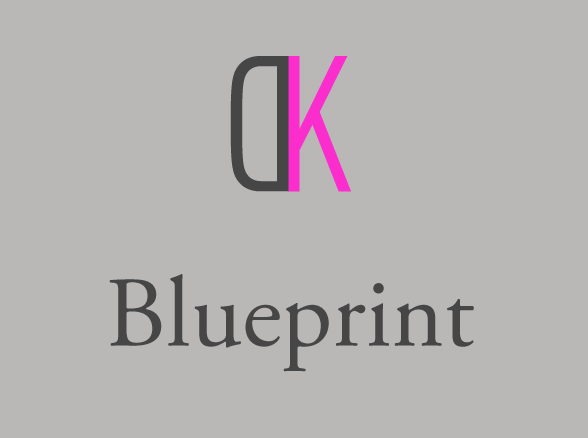
<style>
.page{position:relative;width:588px;height:438px;background:#bab7b7}
.page>*{position:absolute;margin:0}
.t1{font:190px "DINCond-Regular";color:#464646}
.t2{font:190px "DINCond-Regular";color:#fb2dcd}
.t3{font:100px "AGaramondPro-Regular";color:#464646}
</style>
<div class="page">
<p class="t1" style="left:230px;top:56px;width:59px;height:136px;rotate:180deg">D</p>
<p class="t2" style="left:288px;top:56px;width:63px;height:136px">K</p>
<p class="t3" style="left:109px;top:274px;width:365px;height:98px">Blueprint</p>
</div>
